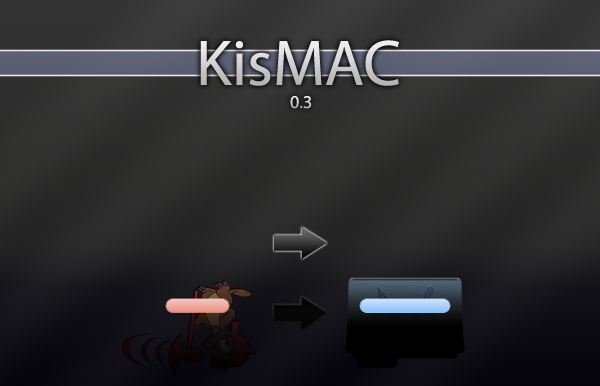
<style>
.page{position:relative;width:600px;height:386px}
.page>*{position:absolute;margin:0}
.t1{font:65px "MyriadPro-Regular"}
.t2{font:18px "MyriadPro-Regular"}
</style>
<div class="page">
<p class="t1" style="left:200px;top:40px;width:199px;height:46px">KisMAC</p>
<p class="t2" style="left:290px;top:96px;width:22px;height:13px">0.3</p>
</div>
